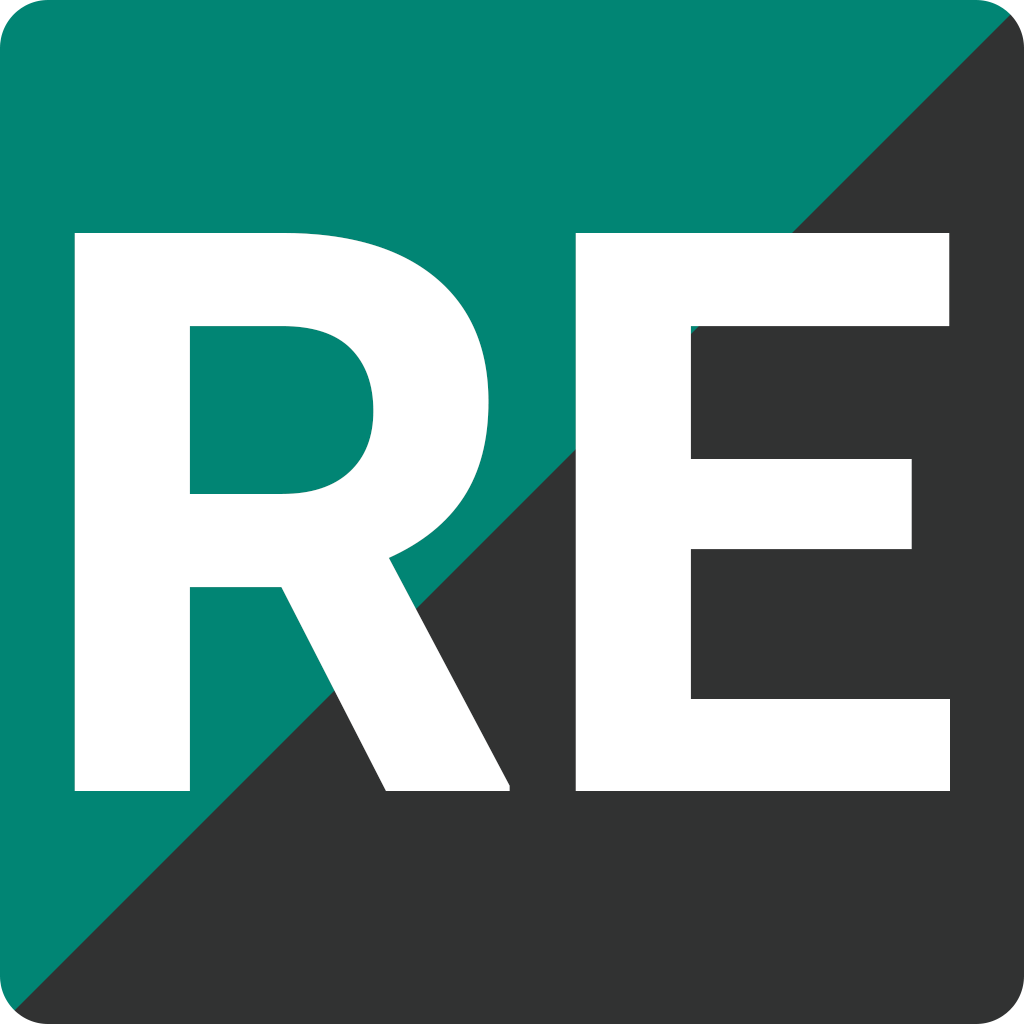
<style>
.page{position:relative;width:1024px;height:1024px;background:#313232}
.page>*{position:absolute;margin:0}
.t1{font:785px "Roboto-Bold";color:#ffffff}
</style>
<div class="page">
<p class="t1" style="left:74px;top:233px;width:876px;height:558px">RE</p>
</div>
